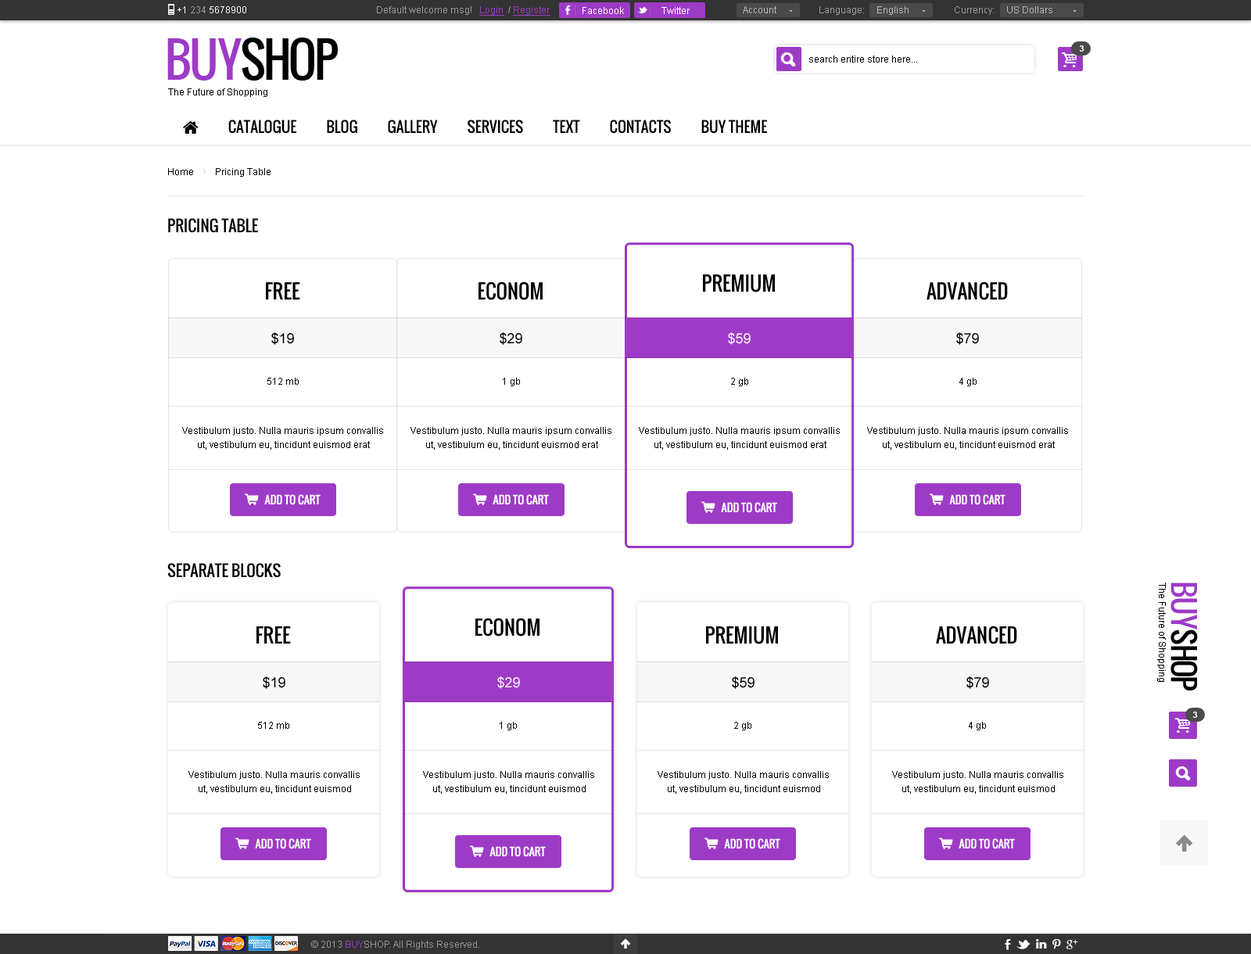
<style>
.page{position:relative;width:1251px;height:954px;background:#ffffff}
.page>*{position:absolute;margin:0}
.t1{font:9.4px "ArialMT";color:#ffffff}
.t2{font:9.4px "ArialMT";color:#9b9b9b}
.t3{font:9.4px "ArialMT";color:#9d3bc6;text-decoration:underline}
.t4{font:9.4px "ArialMT";color:#b6b6b6}
.t5{font:46.9px "Oswald";letter-spacing:-0.06em;color:#000000;text-transform:uppercase}
.t6{font:46.9px "Oswald";letter-spacing:-0.06em;color:#9d3bc6;text-transform:uppercase}
.t7{font:8.6px "Arial-BoldMT";color:#ffffff;text-transform:uppercase}
.t8{font:9.4px "ArialMT";color:#000000}
.t9{font:15.6px "Oswald";color:#000000;text-transform:uppercase}
.t10{font:19.5px "Oswald";color:#000000;text-transform:uppercase}
.t11{font:14.1px "ArialMT";color:#000000}
.t12{font:14.1px "ArialMT";color:#ffffff}
.t13{font:9.4px/14.1px "ArialMT";color:#000000}
.t14{font:10.9px "Oswald";color:#ffffff}
.t15{font:29.7px "Oswald";letter-spacing:-0.06em;color:#000000;text-transform:uppercase}
.t16{font:29.7px "Oswald";letter-spacing:-0.06em;color:#9d3bc6;text-transform:uppercase}
.t17{font:9.4px "ArialMT";color:#959595}
.t18{font:9.4px "ArialMT";color:#9d3bc6}
</style>
<div class="page">
<p class="t1" style="left:177px;top:6px;width:69px;height:7px">+1 <span class="t2">234 </span>5678900</p>
<p class="t2" style="left:377px;top:6px;width:173px;height:10px">Default welcome msg!   <span class="t3">Login </span> / <span class="t3">Register</span></p>
<p class="t2" style="left:377px;top:6px;width:173px;height:10px">Default welcome msg!   <span class="t3">Login </span> / <span class="t3">Register</span></p>
<p class="t1" style="left:582px;top:7px;width:42px;height:7px">Facebook</p>
<p class="t1" style="left:661px;top:7px;width:28px;height:7px">Twitter</p>
<p class="t4" style="left:743px;top:6px;width:33px;height:7px">Account</p>
<p class="t2" style="left:819px;top:6px;width:89px;height:9px">Language:     <span class="t4">English</span></p>
<p class="t4" style="left:954px;top:6px;width:98px;height:9px"><span class="t2">Currency:     </span>US Dollars</p>
<p class="t5" style="left:167px;top:38px;width:171px;height:43px"><span class="t6">buy</span>shop</p>
<p class="t7" style="left:1079px;top:45px;width:5px;height:7px">3</p>
<p class="t8" style="left:809px;top:55px;width:108px;height:8px">search entire store here...</p>
<p class="t8" style="left:168px;top:88px;width:99px;height:9px">The Future of Shopping</p>
<p class="t8" style="left:168px;top:168px;width:102px;height:9px">Home         Pricing Table</p>
<p class="t9" style="left:168px;top:218px;width:90px;height:15px">Pricing table</p>
<p class="t10" style="left:478px;top:281px;width:64px;height:19px">ECONOM</p>
<p class="t10" style="left:703px;top:274px;width:72px;height:18px">PREMIUM</p>
<p class="t10" style="left:926px;top:281px;width:81px;height:19px">ADVANCED</p>
<p class="t10" style="left:266px;top:282px;width:34px;height:17px">FREE</p>
<p class="t11" style="left:271px;top:332px;width:23px;height:13px">$19</p>
<p class="t11" style="left:499px;top:332px;width:23px;height:13px">$29</p>
<p class="t12" style="left:728px;top:332px;width:22px;height:13px">$59</p>
<p class="t11" style="left:956px;top:332px;width:23px;height:13px">$79</p>
<p class="t8" style="left:267px;top:378px;width:32px;height:7px">512 mb</p>
<p class="t8" style="left:503px;top:378px;width:17px;height:8px">1 gb</p>
<p class="t8" style="left:731px;top:378px;width:17px;height:8px">2 gb</p>
<p class="t8" style="left:959px;top:378px;width:17px;height:8px">4 gb</p>
<p class="t13" style="left:182px;top:427px;width:201px;height:22px;text-align:center">Vestibulum justo. Nulla mauris ipsum convallis<br>ut, vestibulum eu, tincidunt euismod erat</p>
<p class="t13" style="left:410px;top:427px;width:201px;height:22px;text-align:center">Vestibulum justo. Nulla mauris ipsum convallis<br>ut, vestibulum eu, tincidunt euismod erat</p>
<p class="t13" style="left:639px;top:427px;width:200px;height:22px;text-align:center">Vestibulum justo. Nulla mauris ipsum convallis<br>ut, vestibulum eu, tincidunt euismod erat</p>
<p class="t13" style="left:867px;top:427px;width:201px;height:22px;text-align:center">Vestibulum justo. Nulla mauris ipsum convallis<br>ut, vestibulum eu, tincidunt euismod erat</p>
<p class="t14" style="left:264px;top:494px;width:56px;height:11px">ADD TO CART</p>
<p class="t14" style="left:492px;top:494px;width:57px;height:11px">ADD TO CART</p>
<p class="t14" style="left:949px;top:494px;width:56px;height:11px">ADD TO CART</p>
<p class="t14" style="left:721px;top:502px;width:56px;height:11px">ADD TO CART</p>
<p class="t9" style="left:167px;top:563px;width:114px;height:15px">SEPARATE BLOCKS</p>
<p class="t8" style="left:1157px;top:582px;width:8px;height:100px;rotate:90deg">The Future of Shopping</p>
<p class="t15" style="left:1170px;top:582px;width:27px;height:108px;rotate:90deg"><span class="t16">buy</span>shop</p>
<p class="t10" style="left:475px;top:617px;width:64px;height:19px">ECONOM</p>
<p class="t10" style="left:256px;top:626px;width:35px;height:17px">FREE</p>
<p class="t10" style="left:706px;top:626px;width:72px;height:18px">PREMIUM</p>
<p class="t10" style="left:936px;top:625px;width:81px;height:19px">ADVANCED</p>
<p class="t11" style="left:263px;top:676px;width:22px;height:13px">$19</p>
<p class="t12" style="left:497px;top:676px;width:23px;height:13px">$29</p>
<p class="t11" style="left:732px;top:676px;width:22px;height:13px">$59</p>
<p class="t11" style="left:966px;top:676px;width:23px;height:13px">$79</p>
<p class="t7" style="left:1192px;top:711px;width:5px;height:6px">3</p>
<p class="t8" style="left:258px;top:721px;width:31px;height:7px">512 mb</p>
<p class="t8" style="left:499px;top:721px;width:18px;height:9px">1 gb</p>
<p class="t8" style="left:734px;top:721px;width:17px;height:9px">2 gb</p>
<p class="t8" style="left:968px;top:721px;width:18px;height:9px">4 gb</p>
<p class="t13" style="left:188px;top:771px;width:172px;height:22px;text-align:center">Vestibulum justo. Nulla mauris convallis<br>ut, vestibulum eu, tincidunt euismod</p>
<p class="t13" style="left:423px;top:771px;width:171px;height:22px;text-align:center">Vestibulum justo. Nulla mauris convallis<br>ut, vestibulum eu, tincidunt euismod</p>
<p class="t13" style="left:657px;top:771px;width:171px;height:22px;text-align:center">Vestibulum justo. Nulla mauris convallis<br>ut, vestibulum eu, tincidunt euismod</p>
<p class="t13" style="left:892px;top:771px;width:171px;height:22px;text-align:center">Vestibulum justo. Nulla mauris convallis<br>ut, vestibulum eu, tincidunt euismod</p>
<p class="t14" style="left:255px;top:838px;width:56px;height:11px">ADD TO CART</p>
<p class="t14" style="left:489px;top:846px;width:57px;height:11px">ADD TO CART</p>
<p class="t14" style="left:724px;top:838px;width:56px;height:11px">ADD TO CART</p>
<p class="t14" style="left:958px;top:838px;width:56px;height:11px">ADD TO CART</p>
<p class="t17" style="left:311px;top:940px;width:168px;height:9px">© 2013 <span class="t18">BUY</span>SHOP. All Rights Reserved.</p>
</div>
